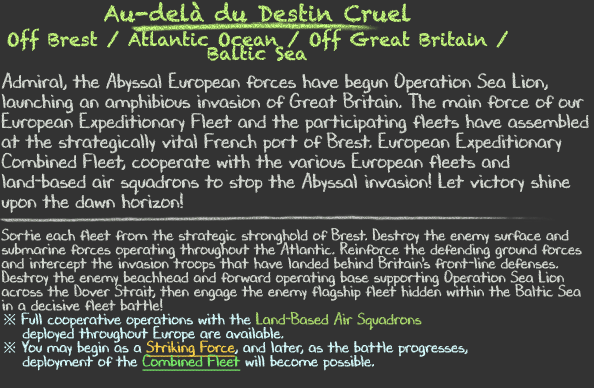
<style>
.page{position:relative;width:594px;height:388px;background:#333333}
.page>*{position:absolute;margin:0}
.t1{font:18px/14px "Chalkduster";color:#bcec77}
.t2{font:22px/28px "Chalkduster";color:#bcec77}
.t3{font:16px/14px "DJBChalkItUp";color:#d9ded6}
.t4{font:20px/20px "DJBChalkItUp";color:#d9ded6}
.t5{font:20px/12px "DJBChalkItUp";color:#d9ded6}
.t6{font:16px/14px "DJBChalkItUp";letter-spacing:-0.04em;color:#d9ded6}
.t7{font:16px/14px "TimesNewRomanPSMT";color:#d7feff}
.t8{font:16px/14px "DJBChalkItUp";color:#d7feff}
.t9{font:16px/14px "DJBChalkItUp";color:#addc6e}
.t10{font:16px/14px "DJBChalkItUp";color:#ffd649;text-decoration:underline}
.t11{font:16px/14px "DJBChalkItUp";color:#7bf26b;text-decoration:underline}
</style>
<div class="page">
<p class="t1" style="left:7px;top:1px;width:501px;height:61px;text-align:center"><span class="t2">Au-delà du Destin Cruel<br></span>Off Brest / Atlantic Ocean / Off Great Britain /<br>Baltic Sea</p>
<p class="t3" style="left:1px;top:72px;width:588px;height:299px"><span class="t4">Admiral, the Abyssal European forces have begun Operation Sea Lion,<br>launching an amphibious invasion of Great Britain. The main force of our<br>European Expeditionary Fleet and the participating fleets have assembled<br>at the strategically vital French port of Brest. European Expeditionary<br>Combined Fleet, cooperate with the various European fleets and<br>land-based air squadrons to stop the Abyssal invasion! Let victory shine<br>upon the dawn horizon</span><span class="t5">!<br><br></span>Sortie each fleet from the strategic stronghold of Brest. Destroy the enemy surface and<br>submarine forces operating throughout the Atlantic. Reinforce the defending ground forces<br>and intercept the invasion troops that have landed behind Britain's front-line defenses.<br>Destroy the enemy beachhead and forward operating base supporting Operation Sea Lion<br>across the Dover Strait, then engage the enemy flagship fleet hidden within the Baltic Sea<br>in a decisive fleet battle<span class="t6">!<br></span><span class="t7">※ </span><span class="t8">Full cooperative operations with the </span><span class="t9">Land-Based Air Squadrons<br>　</span><span class="t8"> deployed throughout Europe are available.<br></span><span class="t7">※ </span><span class="t8">You may begin as a </span><span class="t10">Striking Force</span><span class="t8">, and later, as the battle progresses,<br>　 deployment of the </span><span class="t11">Combined Fleet</span><span class="t8"> will become possible.</span></p>
</div>
